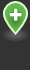
<style>
.page{position:relative;width:30px;height:70px;background:#333333}
.page>*{position:absolute;margin:0}
.t1{font:24px "Gotham-Bold";color:#ffffff}
</style>
<div class="page">
<p class="t1" style="left:9px;top:8px;width:13px;height:13px">+</p>
</div>
